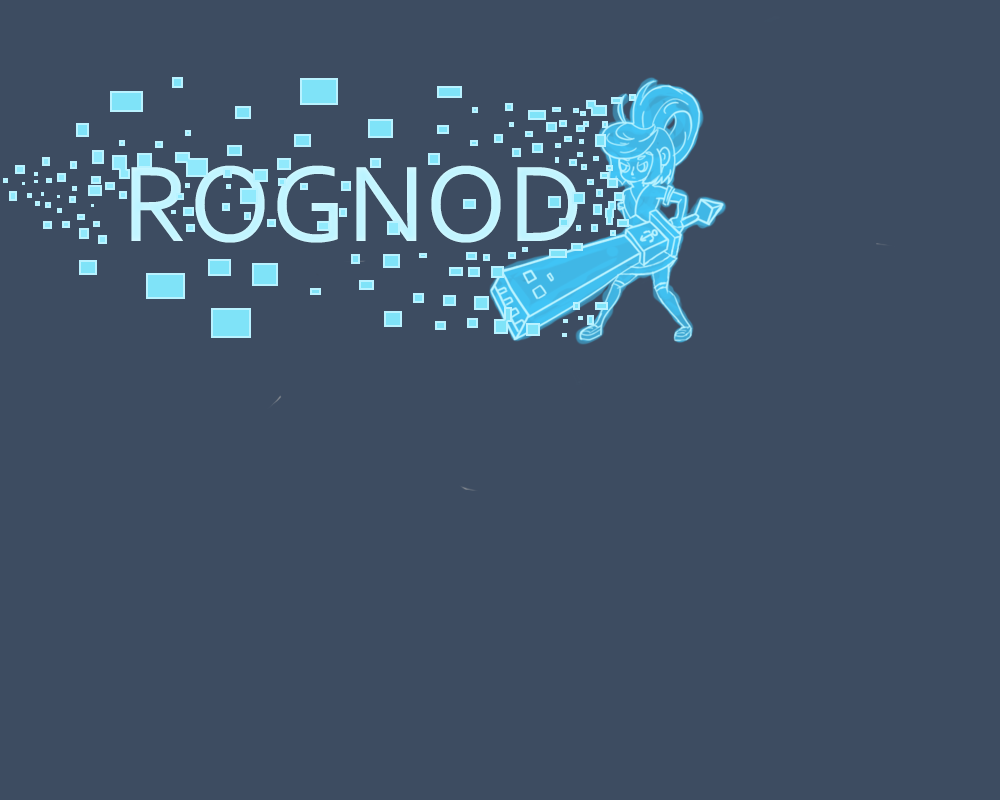
<style>
.page{position:relative;width:1000px;height:800px;background:#3d4c61}
.page>*{position:absolute;margin:0}
.t1{font:112.9px "Corbel";color:#b9f3ff}
</style>
<div class="page">
<p class="t1" style="left:131px;top:165px;width:447px;height:78px">ROGNOD</p>
</div>
